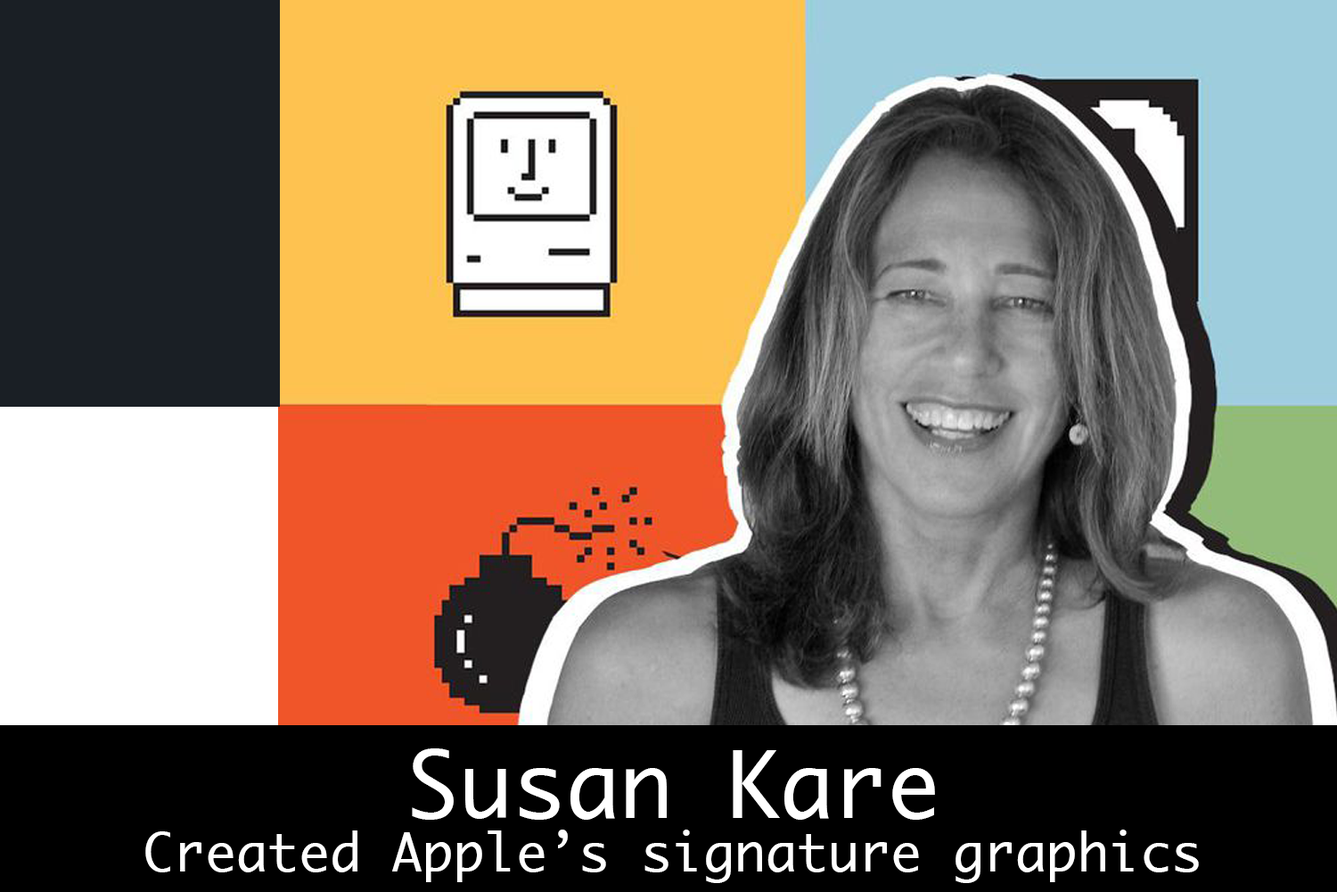
<style>
.page{position:relative;width:1337px;height:892px}
.page>*{position:absolute;margin:0}
.t1{font:89.2px "Ayuthaya";color:#ffffff}
.t2{font:52px "Ayuthaya";color:#ffffff}
</style>
<div class="page">
<p class="t1" style="left:412px;top:748px;width:523px;height:71px">Susan Kare</p>
<p class="t2" style="left:145px;top:829px;width:1054px;height:54px">Created Apple’s signature graphics</p>
</div>
